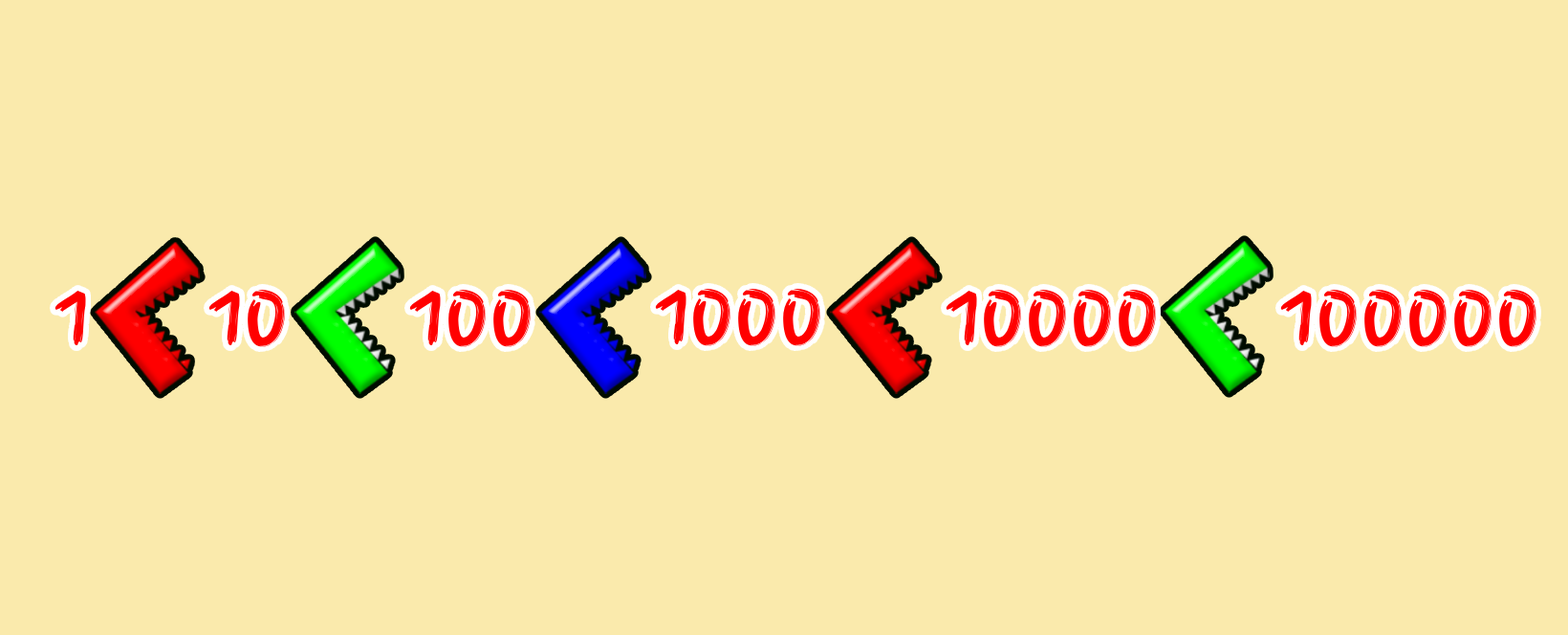
<style>
.page{position:relative;width:1568px;height:635px;background:#faeaac}
.page>*{position:absolute;margin:0}
.t1{font:79.4px "FingerPaint-Regular";color:#ff0000}
</style>
<div class="page">
<p class="t1" style="left:54px;top:291px;width:32px;height:54px">1</p>
<p class="t1" style="left:208px;top:290px;width:77px;height:57px">10</p>
<p class="t1" style="left:409px;top:290px;width:122px;height:57px">100</p>
<p class="t1" style="left:655px;top:289px;width:165px;height:57px">1000</p>
<p class="t1" style="left:946px;top:290px;width:210px;height:57px">10000</p>
<p class="t1" style="left:1280px;top:290px;width:256px;height:57px">100000</p>
</div>
